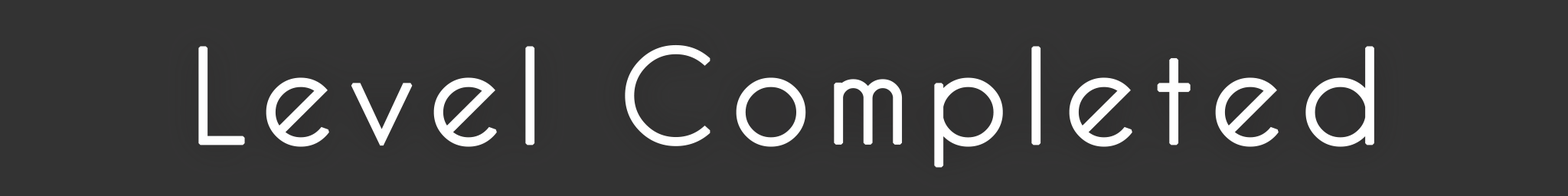
<style>
.page{position:relative;width:1568px;height:196px;background:#333333}
.page>*{position:absolute;margin:0}
.t1{font:121.9px "CaviarDreams";letter-spacing:0.12em;color:#ffffff;font-weight:bold}
</style>
<div class="page">
<p class="t1" style="left:198px;top:44px;width:1176px;height:124px">Level Completed</p>
</div>
